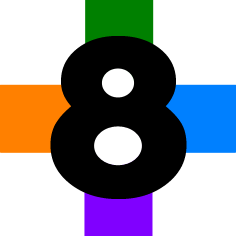
<style>
.page{position:relative;width:236px;height:236px;background:#ffffff}
.page>*{position:absolute;margin:0}
.t1{font:233.4px "Bauhaus93";color:#000000;scale:1.23 1}
</style>
<div class="page">
<p class="t1" style="left:50px;top:36px;width:137px;height:163px">8</p>
</div>
